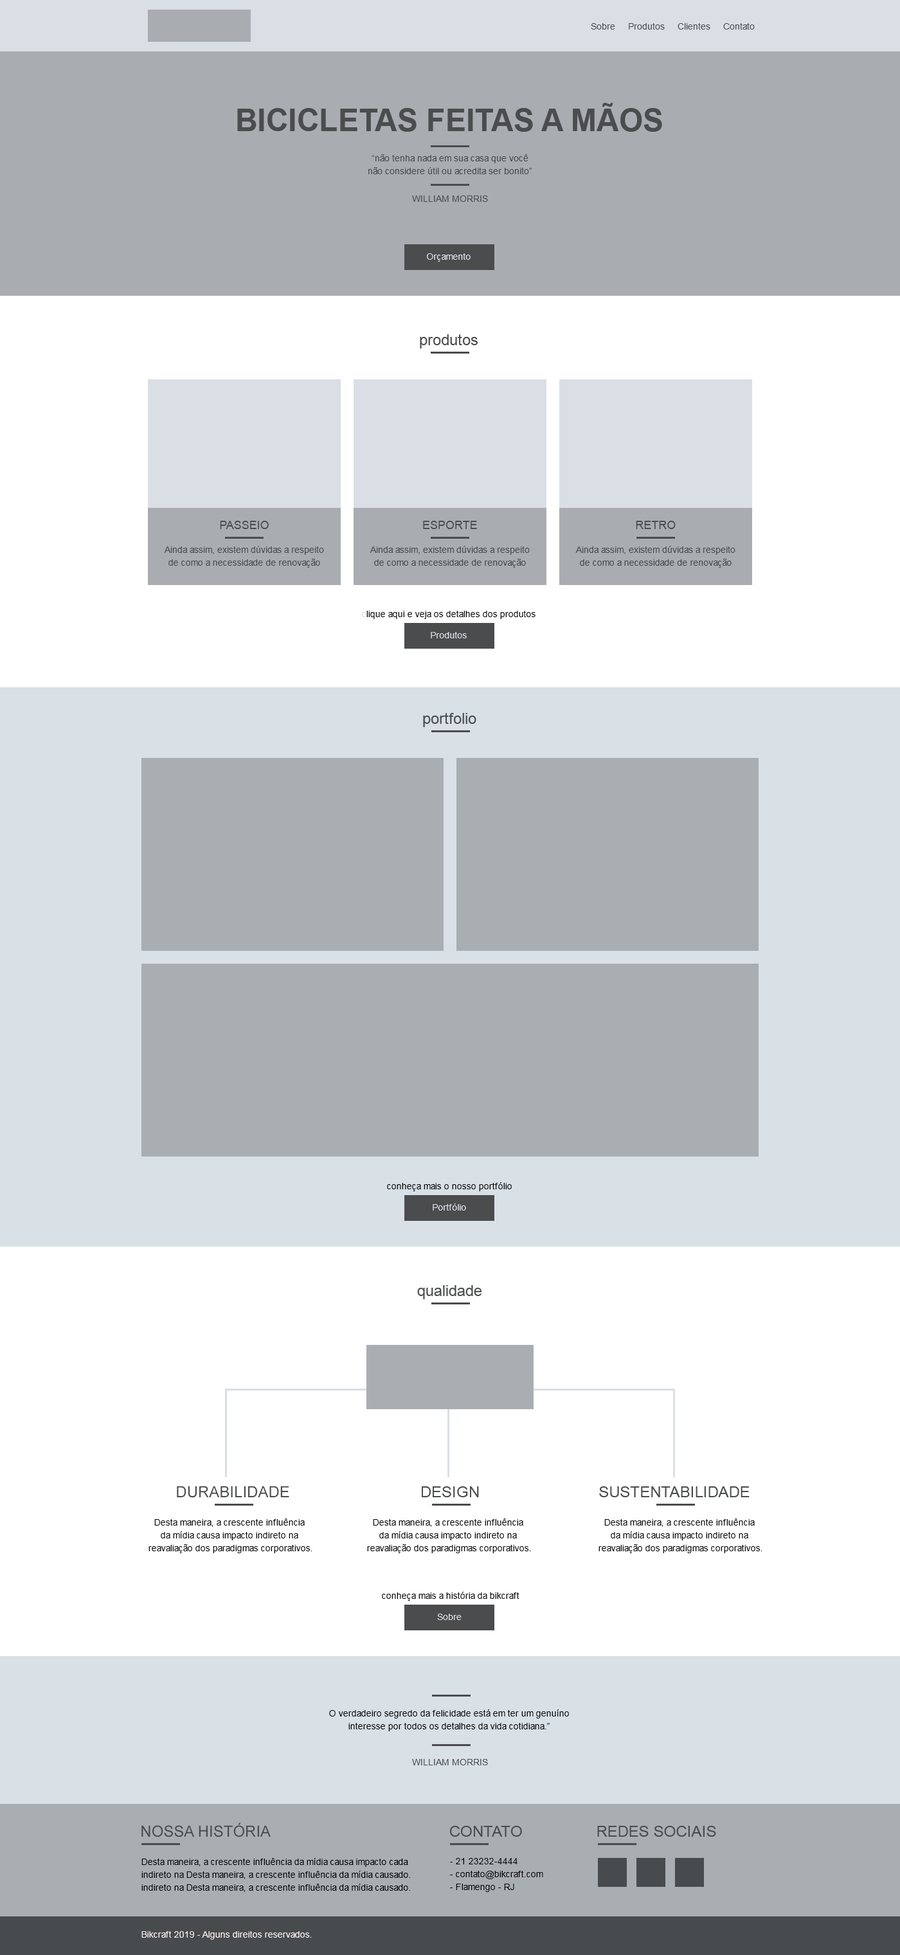
<style>
.page{position:relative;width:900px;height:1955px;background:#ffffff}
.page>*{position:absolute;margin:0}
.t1{font:9px "ArialMT";color:#4a4c4e}
.t2{font:30.9px "Arial-BoldMT";color:#4a4c4e;text-transform:uppercase}
.t3{font:9px/12.9px "ArialMT";color:#4a4c4e}
.t4{font:9px "ArialMT";color:#d9e0e6}
.t5{font:15.4px "ArialMT";color:#4a4c4e}
.t6{font:11.6px "ArialMT";color:#4a4c4e}
.t7{font:9px "ArialMT";color:#000000}
.t8{font:9px/12.9px "ArialMT";color:#000000}
.t9{font:9px "ArialMT";color:#f9f0f0}
</style>
<div class="page">
<p class="t1" style="left:591px;top:23px;width:164px;height:7px">Sobre     Produtos     Clientes     Contato</p>
<p class="t2" style="left:237px;top:103px;width:425px;height:29px">Bicicletas Feitas a Mãos</p>
<p class="t3" style="left:368px;top:154px;width:164px;height:20px;text-align:center">“não tenha nada em sua casa que você<br>não considere útil ou acredita ser bonito”</p>
<p class="t1" style="left:412px;top:195px;width:76px;height:7px">WILLIAM MORRIS</p>
<p class="t4" style="left:427px;top:253px;width:44px;height:9px">Orçamento</p>
<p class="t5" style="left:420px;top:334px;width:58px;height:14px">produtos</p>
<p class="t6" style="left:220px;top:521px;width:49px;height:8px">PASSEIO</p>
<p class="t6" style="left:423px;top:521px;width:54px;height:8px">ESPORTE</p>
<p class="t6" style="left:636px;top:521px;width:40px;height:8px">RETRO</p>
<p class="t3" style="left:164px;top:546px;width:160px;height:22px;text-align:center">Ainda assim, existem dúvidas a respeito de como a necessidade de renovação</p>
<p class="t3" style="left:370px;top:546px;width:160px;height:22px;text-align:center">Ainda assim, existem dúvidas a respeito de como a necessidade de renovação</p>
<p class="t3" style="left:575px;top:546px;width:160px;height:22px;text-align:center">Ainda assim, existem dúvidas a respeito de como a necessidade de renovação</p>
<p class="t7" style="left:362px;top:611px;width:174px;height:8px"><span class="t4">c</span>lique aqui e veja os detalhes dos produtos</p>
<p class="t4" style="left:431px;top:632px;width:36px;height:6px">Produtos</p>
<p class="t5" style="left:423px;top:712px;width:53px;height:15px">portfolio</p>
<p class="t7" style="left:387px;top:1182px;width:125px;height:9px">conheça mais o nosso portfólio</p>
<p class="t4" style="left:433px;top:1203px;width:33px;height:7px">Portfólio</p>
<p class="t5" style="left:417px;top:1285px;width:65px;height:14px">qualidade</p>
<p class="t5" style="left:177px;top:1486px;width:112px;height:12px">DURABILIDADE</p>
<p class="t5" style="left:422px;top:1486px;width:57px;height:11px">DESIGN</p>
<p class="t5" style="left:599px;top:1486px;width:151px;height:11px">SUSTENTABILIDADE</p>
<p class="t8" style="left:148px;top:1518px;width:164px;height:35px;text-align:center">Desta maneira, a crescente influência <br>da mídia causa impacto indireto na <br>reavaliação dos paradigmas corporativos.</p>
<p class="t8" style="left:367px;top:1518px;width:164px;height:35px;text-align:center">Desta maneira, a crescente influência <br>da mídia causa impacto indireto na <br>reavaliação dos paradigmas corporativos.</p>
<p class="t8" style="left:598px;top:1518px;width:164px;height:35px;text-align:center">Desta maneira, a crescente influência <br>da mídia causa impacto indireto na <br>reavaliação dos paradigmas corporativos.</p>
<p class="t7" style="left:382px;top:1592px;width:137px;height:9px">conheça mais a história da bikcraft</p>
<p class="t4" style="left:437px;top:1614px;width:25px;height:6px">Sobre</p>
<p class="t8" style="left:329px;top:1709px;width:240px;height:22px;text-align:center">O verdadeiro segredo da felicidade está em ter um genuíno<br>interesse por todos os detalhes da vida cotidiana.”</p>
<p class="t1" style="left:412px;top:1759px;width:76px;height:6px">WILLIAM MORRIS</p>
<p class="t5" style="left:141px;top:1823px;width:130px;height:14px">NOSSA HISTÓRIA</p>
<p class="t5" style="left:450px;top:1826px;width:72px;height:11px">CONTATO</p>
<p class="t5" style="left:597px;top:1826px;width:119px;height:11px">REDES SOCIAIS</p>
<p class="t8" style="left:141px;top:1858px;width:269px;height:34px">Desta maneira, a crescente influência da mídia causa impacto cada<br>indireto na Desta maneira, a crescente influência da mídia causado. <br>indireto na Desta maneira, a crescente influência da mídia causado.</p>
<p class="t8" style="left:450px;top:1858px;width:93px;height:34px">- 21 23232-4444<br>- contato@bikcraft.com<br>- Flamengo - RJ</p>
<p class="t9" style="left:141px;top:1931px;width:171px;height:9px">Bikcraft 2019 - Alguns direitos reservados.</p>
</div>
